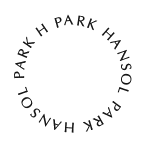
<style>
.page{position:relative;width:145px;height:145px;background:#ffffff}
.page>*{position:absolute;margin:0}
.t1{font:14px "OptimaLTStd";letter-spacing:0.14em;color:#171717}
</style>
<div class="page">
<p class="t1" style="left:14px;top:14px;width:118px;height:119px">PARK HANSOL PARK HANSOL PARK H hhHANSOL</p>
</div>
